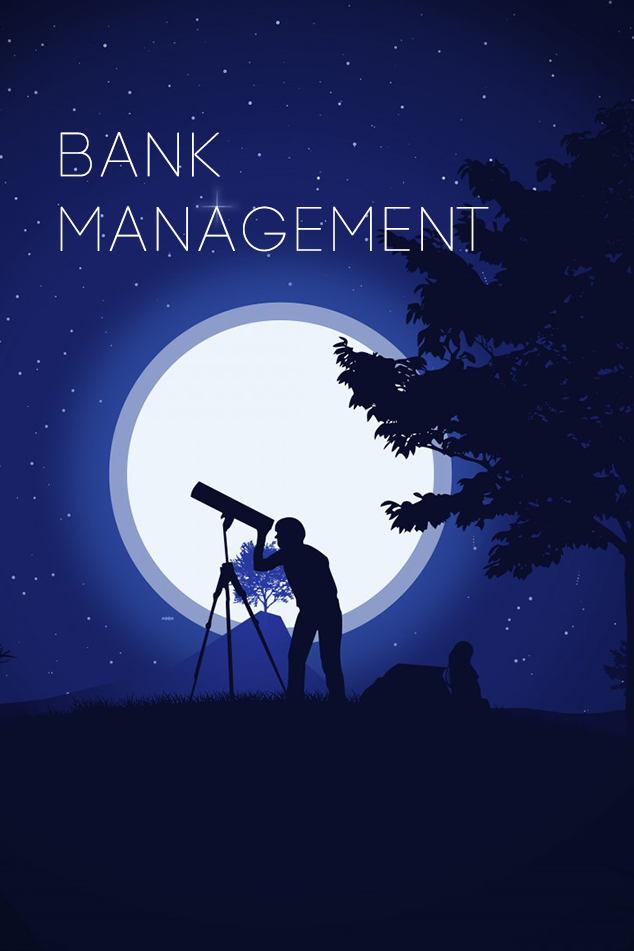
<style>
.page{position:relative;width:634px;height:951px;background:#0a0e2b}
.page>*{position:absolute;margin:0}
.t1{font:62px "Code-Light";letter-spacing:0.1em;color:#ffffff;font-weight:bold}
</style>
<div class="page">
<p class="t1" style="left:60px;top:132px;width:429px;height:120px">Bank<br>Management</p>
</div>
